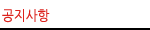
<style>
.page{position:relative;width:150px;height:30px;background:#ffffff}
.page>*{position:absolute;margin:0}
.t1{font:14px "NanumGothic";color:#dc241f;scale:0.9 1}
</style>
<div class="page">
<p class="t1" style="left:2px;top:9px;width:48px;height:14px">공지사항</p>
</div>
